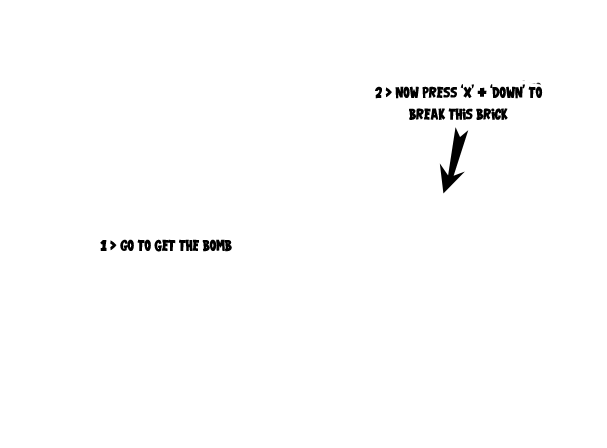
<style>
.page{position:relative;width:607px;height:448px;background:#ffffff}
.page>*{position:absolute;margin:0}
.t1{font:18px "000VTC-GarageSaleTB";color:#000000}
</style>
<div class="page">
<p class="t1" style="left:375px;top:84px;width:168px;height:36px;text-align:center">2 &gt; now press ‘x’ + ‘down’ to break this brick</p>
<p class="t1" style="left:100px;top:239px;width:132px;height:13px">1 &gt; Go to get the bomb</p>
</div>
